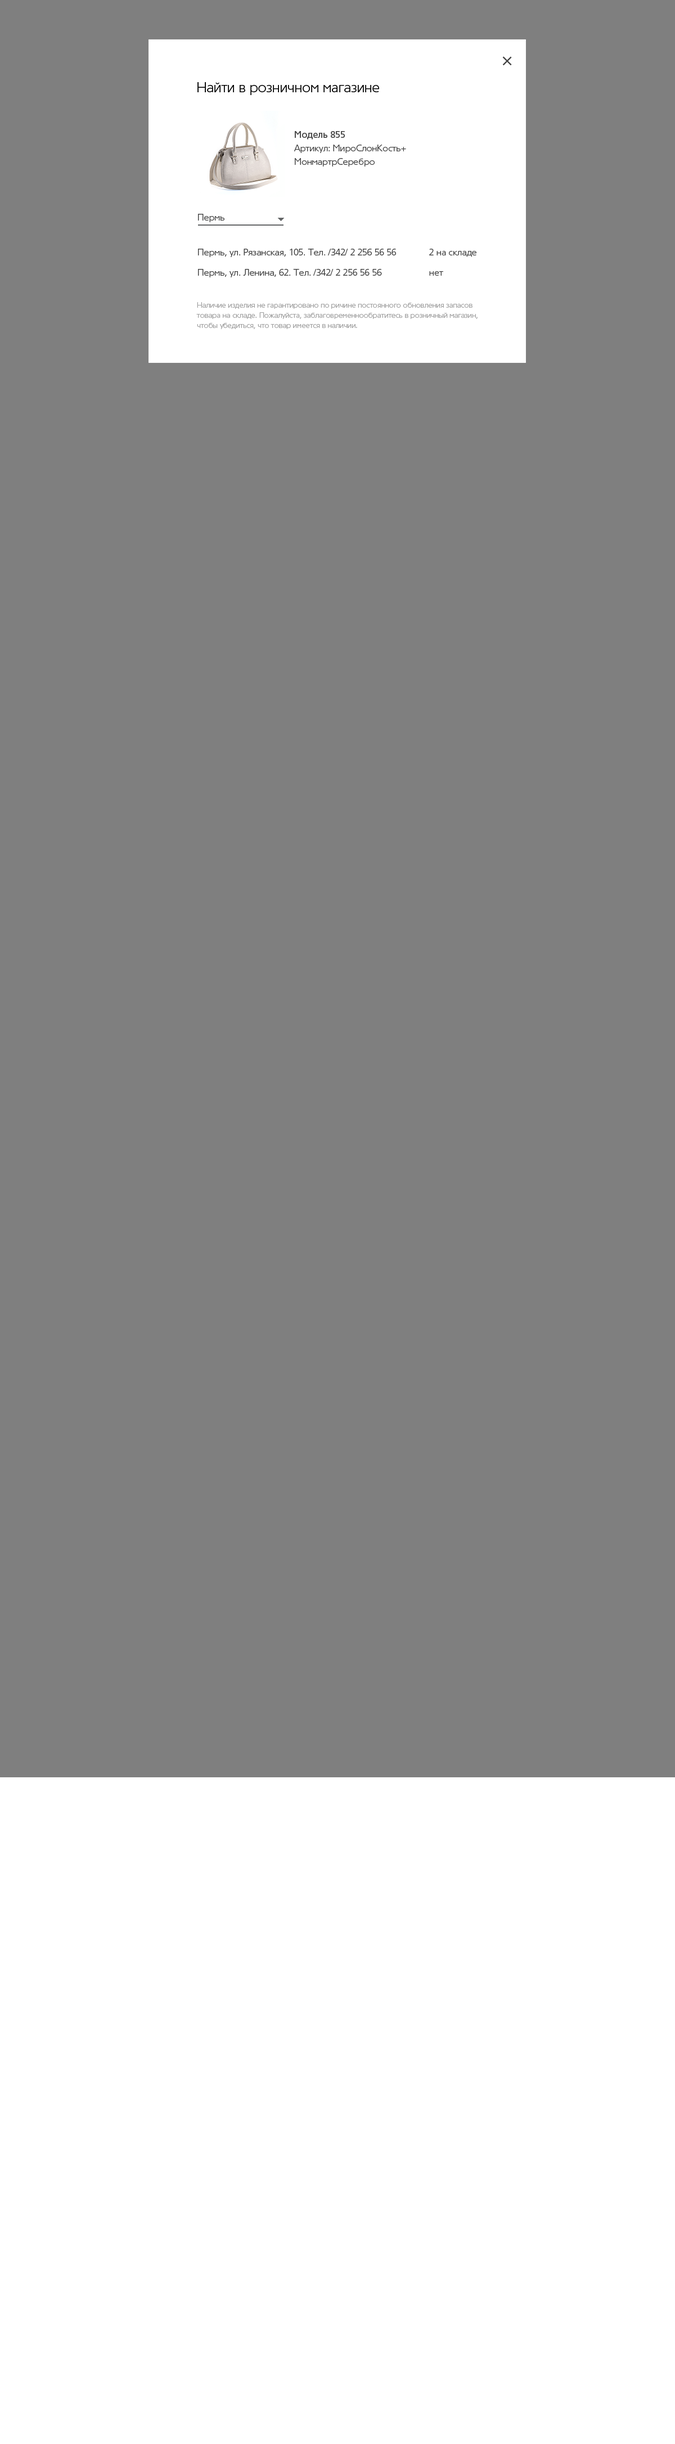
<style>
.page{position:relative;width:675px;height:2444px;background:#7f7f7f}
.page>*{position:absolute;margin:0}
.t1{font:22.4px "TornadoCyr-Light";color:#414141}
.t2{font:13.6px "TornadoCyr-Light";color:#000000}
.t3{font:9px/13.5px "TornadoCyr-Light";color:#414141}
.t4{font:9px/13.5px "TornadoCyr-Medium";color:#414141}
.t5{font:9px "TornadoCyr-Light";color:#414141}
.t6{font:9px/20.3px "TornadoCyr-Light";color:#414141}
.t7{font:7.3px/10.1px "TornadoCyr-Light";color:#a1a1a1}
</style>
<div class="page">
<p class="t1" style="left:502px;top:56px;width:10px;height:10px;rotate:45deg">+</p>
<p class="t2" style="left:197px;top:82px;width:182px;height:13px">Найти в розничном магазине</p>
<p class="t3" style="left:294px;top:131px;width:112px;height:36px"><span class="t4">Модель 855<br></span>Артикул: МироСлонКость+<br>МонмартрСеребро</p>
<p class="t5" style="left:198px;top:214px;width:26px;height:8px">Пермь</p>
<p class="t6" style="left:198px;top:249px;width:198px;height:28px">Пермь, ул. Рязанская, 105. Тел. /342/ 2 256 56 56<br>Пермь, ул. Ленина, 62. Тел. /342/ 2 256 56 56</p>
<p class="t6" style="left:429px;top:249px;width:47px;height:27px">2 на складе<br>нет</p>
<p class="t7" style="left:196px;top:302px;width:282px;height:27px">Наличие изделия не гарантировано по ричине постоянного обновления запасов <br>товара на складе. Пожалуйста, заблаговременнообратитесь в розничный магазин, <br>чтобы убедиться, что товар имеется в наличии.</p>
</div>
